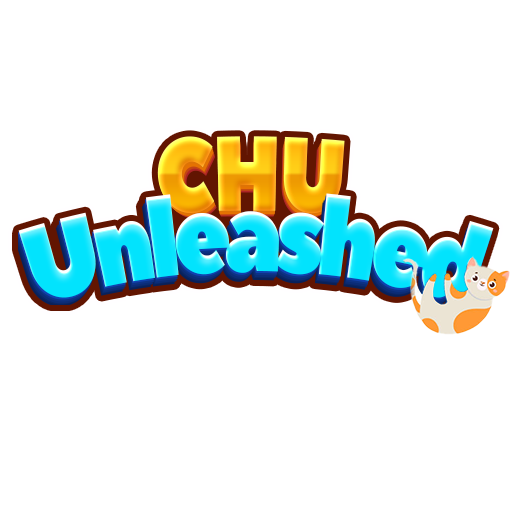
<style>
.page{position:relative;width:512px;height:512px;background:#ffffff}
.page>*{position:absolute;margin:0}
.t1{font:101.2px "PeaceSans";letter-spacing:-0.025em;scale:0.83 1}
.t2{font:100.2px "PeaceSans";letter-spacing:-0.025em;scale:0.83 1}
.t3{font:99.2px "PeaceSans";letter-spacing:-0.025em;scale:0.83 1}
.t4{font:98.2px "PeaceSans";letter-spacing:-0.025em;scale:0.83 1}
.t5{font:97.2px "PeaceSans";letter-spacing:-0.025em;scale:0.83 1}
.t6{font:96.2px "PeaceSans";letter-spacing:-0.025em;scale:0.83 1}
.t7{font:95.3px "PeaceSans";letter-spacing:-0.025em;scale:0.83 1}
.t8{font:94.3px "PeaceSans";letter-spacing:-0.025em;scale:0.83 1}
.t9{font:109.6px "PeaceSans";letter-spacing:-0.075em;color:#02e3fd;scale:0.77 1}
</style>
<div class="page">
<p class="t1" style="left:157px;top:136px;width:188px;height:78px">CHU</p>
<p class="t2" style="left:158px;top:138px;width:186px;height:77px">CHU</p>
<p class="t3" style="left:159px;top:140px;width:184px;height:77px">CHU</p>
<p class="t4" style="left:160px;top:142px;width:182px;height:75px">CHU</p>
<p class="t5" style="left:161px;top:143px;width:180px;height:75px">CHU</p>
<p class="t6" style="left:162px;top:144px;width:178px;height:74px">CHU</p>
<p class="t7" style="left:163px;top:145px;width:176px;height:74px">CHU</p>
<p class="t8" style="left:164px;top:147px;width:175px;height:72px">CHU</p>
<p class="t9" style="left:18px;top:193px;width:476px;height:112px">Unleashed</p>
</div>
